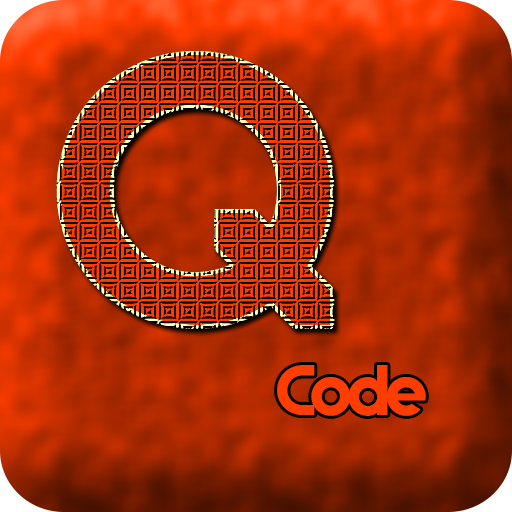
<style>
.page{position:relative;width:512px;height:512px}
.page>*{position:absolute;margin:0}
.t1{font:72px "Rostov";letter-spacing:-0.05em;color:#ff3d00}
</style>
<div class="page">
<p class="t1" style="left:277px;top:365px;width:149px;height:51px">Code</p>
</div>
